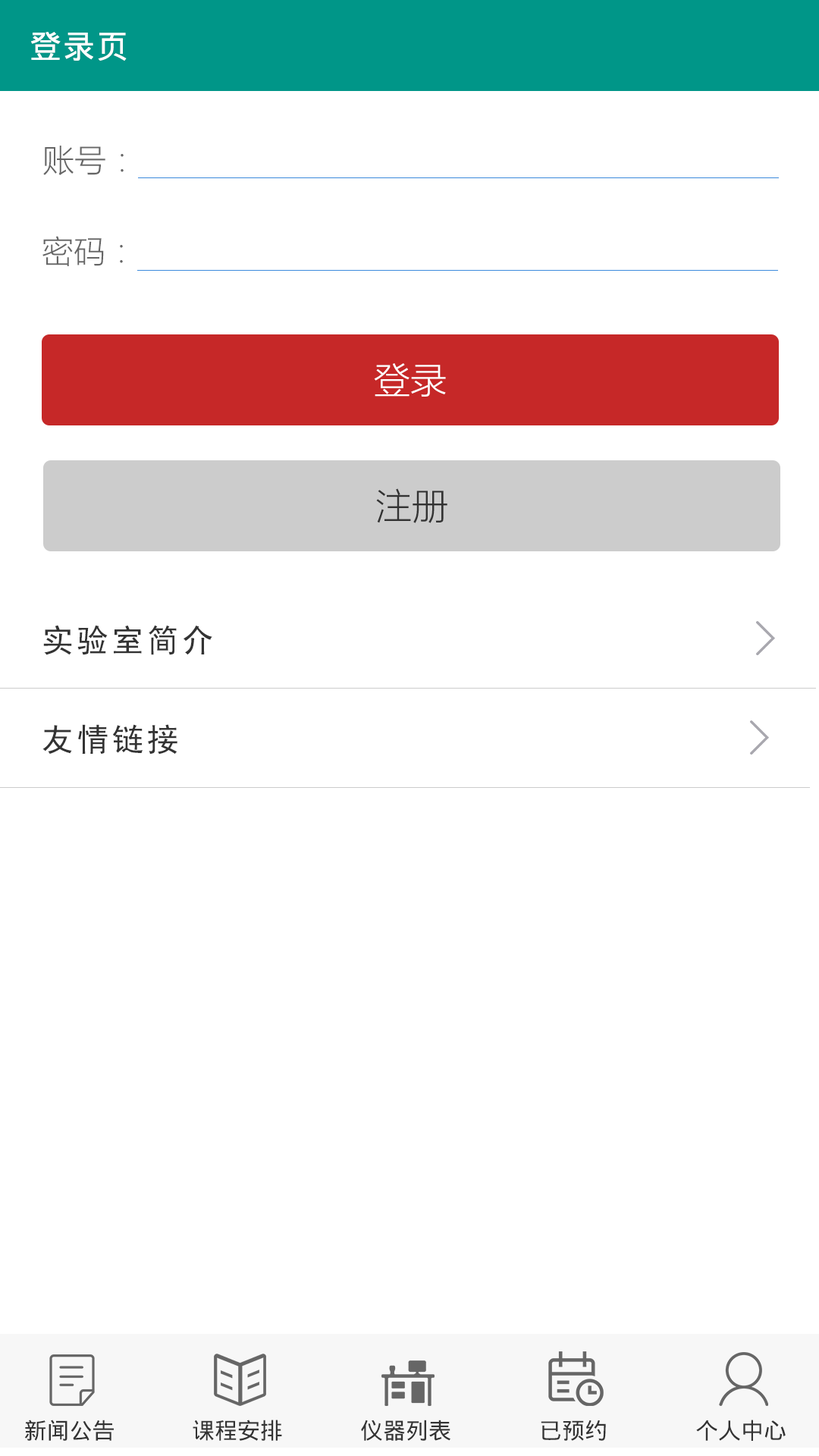
<style>
.page{position:relative;width:819px;height:1456px;background:#ffffff}
.page>*{position:absolute;margin:0}
.t1{font:31.8px "DroidSansFallback";letter-spacing:0.05em;color:#ffffff}
.t2{font:31.8px "MicrosoftYaHeiLight";color:#666666}
.t3{font:36.4px "MicrosoftYaHeiLight";color:#ffffff}
.t4{font:36.4px "MicrosoftYaHeiLight";color:#333333}
.t5{font:31.8px "SimHei";letter-spacing:0.1em;color:#333333}
.t6{font:22.7px "DroidSansFallback";color:#333333}
</style>
<div class="page">
<p class="t1" style="left:31px;top:32px;width:96px;height:29px">登录页</p>
<p class="t2" style="left:43px;top:146px;width:81px;height:29px">账号：</p>
<p class="t2" style="left:42px;top:236px;width:81px;height:30px">密码：</p>
<p class="t3" style="left:374px;top:363px;width:72px;height:34px">登录</p>
<p class="t4" style="left:376px;top:488px;width:71px;height:35px">注册</p>
<p class="t5" style="left:43px;top:625px;width:169px;height:30px">实验室简介</p>
<p class="t5" style="left:42px;top:724px;width:135px;height:31px">友情链接</p>
<p class="t6" style="left:24px;top:1420px;width:90px;height:21px">新闻公告</p>
<p class="t6" style="left:193px;top:1420px;width:89px;height:21px">课程安排</p>
<p class="t6" style="left:361px;top:1420px;width:89px;height:21px">仪器列表</p>
<p class="t6" style="left:541px;top:1420px;width:65px;height:21px">已预约</p>
<p class="t6" style="left:696px;top:1420px;width:90px;height:21px">个人中心</p>
</div>
